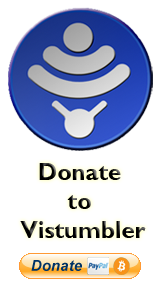
<style>
.page{position:relative;width:160px;height:300px;background:#ffffff}
.page>*{position:absolute;margin:0}
.t1{font:24px "GillSansMT-Bold";color:#000000}
</style>
<div class="page">
<p class="t1" style="left:20px;top:163px;width:126px;height:75px;text-align:center">Donate <br>to <br>Vistumbler</p>
</div>
